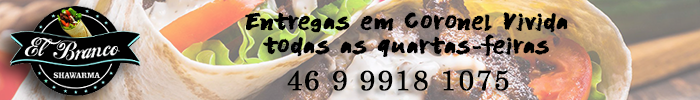
<style>
.page{position:relative;width:700px;height:100px}
.page>*{position:absolute;margin:0}
.t1{font:24px/24px "DKFlagellumDei-Regular";letter-spacing:0.05em;color:#000000;font-weight:bold}
.t2{font:28.3px "Century";letter-spacing:0.05em;color:#010101;font-weight:bold}
</style>
<div class="page">
<p class="t1" style="left:245px;top:11px;width:323px;height:46px;text-align:center">Entregas em Coronel Vivida<br>todas as quartas-feiras</p>
<p class="t2" style="left:287px;top:70px;width:222px;height:21px">46 9 9918 1075</p>
</div>
